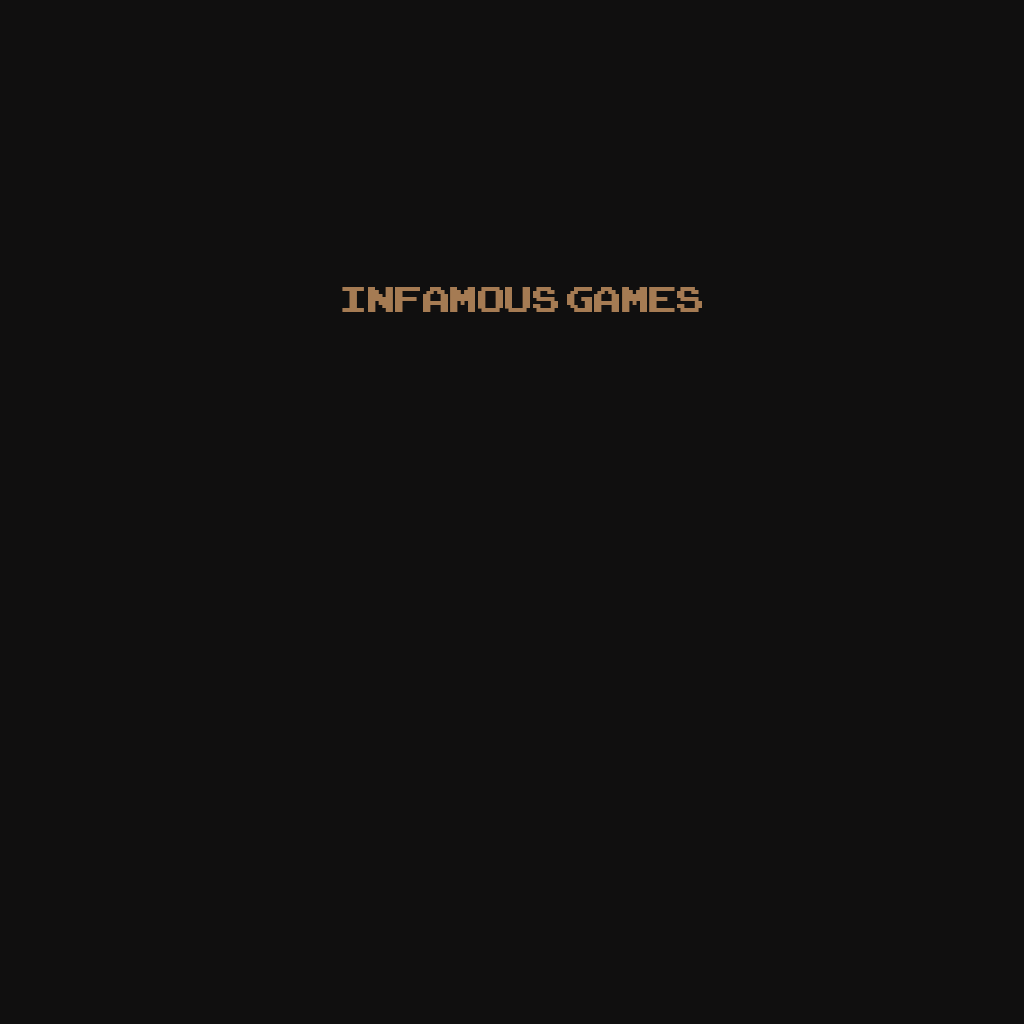
<style>
.page{position:relative;width:1024px;height:1024px;background:#100f0f}
.page>*{position:absolute;margin:0}
.t1{font:12px "ArcadeClassic";color:#a57b53}
</style>
<div class="page">
<p class="t1" style="left:342px;top:287px;width:360px;height:25px">INFAMOUS GAMES</p>
</div>
